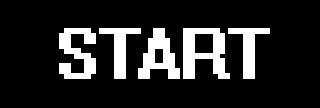
<style>
.page{position:relative;width:320px;height:108px;background:#000000}
.page>*{position:absolute;margin:0}
.t1{font:62.5px "System";letter-spacing:0.01em;color:#ffffff;font-weight:bold}
</style>
<div class="page">
<p class="t1" style="left:59px;top:28px;width:211px;height:51px">START</p>
</div>
